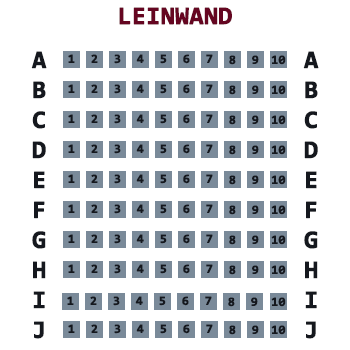
<style>
.page{position:relative;width:350px;height:350px;background:#ffffff}
.page>*{position:absolute;margin:0}
.t1{font:25px "Consolas-Bold";color:#650621;font-weight:bold}
.t2{font:25px "Consolas-Bold";color:#15181e;font-weight:bold}
.t3{font:12.5px "Consolas-Bold";color:#15181e;font-weight:bold}
</style>
<div class="page">
<p class="t1" style="left:119px;top:7px;width:113px;height:18px">LEINWAND</p>
<p class="t2" style="left:31px;top:51px;width:16px;height:288px">A<br>B<br>C<br>D<br>E<br>F<br>G<br>H<br>I<br>J</p>
<p class="t3" style="left:68px;top:54px;width:7px;height:9px">1</p>
<p class="t3" style="left:91px;top:54px;width:7px;height:9px">2</p>
<p class="t3" style="left:114px;top:54px;width:7px;height:10px">3</p>
<p class="t3" style="left:136px;top:54px;width:8px;height:9px">4</p>
<p class="t3" style="left:160px;top:54px;width:7px;height:10px">5</p>
<p class="t3" style="left:183px;top:54px;width:7px;height:10px">6</p>
<p class="t3" style="left:206px;top:54px;width:7px;height:9px">7</p>
<p class="t2" style="left:303px;top:51px;width:16px;height:288px">A<br>B<br>C<br>D<br>E<br>F<br>G<br>H<br>I<br>J</p>
<p class="t3" style="left:229px;top:55px;width:7px;height:10px">8</p>
<p class="t3" style="left:252px;top:55px;width:7px;height:9px">9</p>
<p class="t3" style="left:271px;top:55px;width:15px;height:10px">10</p>
<p class="t3" style="left:68px;top:84px;width:7px;height:9px">1</p>
<p class="t3" style="left:91px;top:84px;width:7px;height:9px">2</p>
<p class="t3" style="left:114px;top:84px;width:7px;height:10px">3</p>
<p class="t3" style="left:136px;top:84px;width:8px;height:9px">4</p>
<p class="t3" style="left:160px;top:84px;width:7px;height:10px">5</p>
<p class="t3" style="left:183px;top:84px;width:7px;height:10px">6</p>
<p class="t3" style="left:206px;top:84px;width:7px;height:9px">7</p>
<p class="t3" style="left:229px;top:85px;width:7px;height:10px">8</p>
<p class="t3" style="left:252px;top:85px;width:7px;height:9px">9</p>
<p class="t3" style="left:271px;top:85px;width:15px;height:10px">10</p>
<p class="t3" style="left:68px;top:114px;width:7px;height:9px">1</p>
<p class="t3" style="left:91px;top:114px;width:7px;height:9px">2</p>
<p class="t3" style="left:114px;top:114px;width:7px;height:10px">3</p>
<p class="t3" style="left:136px;top:114px;width:8px;height:9px">4</p>
<p class="t3" style="left:160px;top:114px;width:7px;height:10px">5</p>
<p class="t3" style="left:183px;top:114px;width:7px;height:10px">6</p>
<p class="t3" style="left:206px;top:114px;width:7px;height:9px">7</p>
<p class="t3" style="left:229px;top:115px;width:7px;height:10px">8</p>
<p class="t3" style="left:252px;top:115px;width:7px;height:9px">9</p>
<p class="t3" style="left:271px;top:115px;width:15px;height:10px">10</p>
<p class="t3" style="left:68px;top:144px;width:7px;height:9px">1</p>
<p class="t3" style="left:91px;top:144px;width:7px;height:9px">2</p>
<p class="t3" style="left:114px;top:144px;width:7px;height:10px">3</p>
<p class="t3" style="left:136px;top:144px;width:8px;height:9px">4</p>
<p class="t3" style="left:160px;top:144px;width:7px;height:10px">5</p>
<p class="t3" style="left:183px;top:144px;width:7px;height:10px">6</p>
<p class="t3" style="left:206px;top:144px;width:7px;height:9px">7</p>
<p class="t3" style="left:229px;top:145px;width:7px;height:10px">8</p>
<p class="t3" style="left:252px;top:145px;width:7px;height:9px">9</p>
<p class="t3" style="left:271px;top:145px;width:15px;height:10px">10</p>
<p class="t3" style="left:68px;top:174px;width:7px;height:9px">1</p>
<p class="t3" style="left:91px;top:174px;width:7px;height:9px">2</p>
<p class="t3" style="left:114px;top:174px;width:7px;height:10px">3</p>
<p class="t3" style="left:136px;top:174px;width:8px;height:9px">4</p>
<p class="t3" style="left:160px;top:174px;width:7px;height:10px">5</p>
<p class="t3" style="left:183px;top:174px;width:7px;height:10px">6</p>
<p class="t3" style="left:206px;top:174px;width:7px;height:9px">7</p>
<p class="t3" style="left:229px;top:175px;width:7px;height:10px">8</p>
<p class="t3" style="left:252px;top:175px;width:7px;height:9px">9</p>
<p class="t3" style="left:271px;top:175px;width:15px;height:10px">10</p>
<p class="t3" style="left:68px;top:204px;width:7px;height:9px">1</p>
<p class="t3" style="left:91px;top:204px;width:7px;height:9px">2</p>
<p class="t3" style="left:114px;top:204px;width:7px;height:10px">3</p>
<p class="t3" style="left:136px;top:204px;width:8px;height:9px">4</p>
<p class="t3" style="left:160px;top:204px;width:7px;height:10px">5</p>
<p class="t3" style="left:183px;top:204px;width:7px;height:10px">6</p>
<p class="t3" style="left:206px;top:204px;width:7px;height:9px">7</p>
<p class="t3" style="left:229px;top:205px;width:7px;height:10px">8</p>
<p class="t3" style="left:252px;top:205px;width:7px;height:9px">9</p>
<p class="t3" style="left:271px;top:205px;width:15px;height:10px">10</p>
<p class="t3" style="left:68px;top:234px;width:7px;height:9px">1</p>
<p class="t3" style="left:91px;top:234px;width:7px;height:9px">2</p>
<p class="t3" style="left:114px;top:234px;width:7px;height:10px">3</p>
<p class="t3" style="left:136px;top:234px;width:8px;height:9px">4</p>
<p class="t3" style="left:160px;top:234px;width:7px;height:10px">5</p>
<p class="t3" style="left:183px;top:234px;width:7px;height:10px">6</p>
<p class="t3" style="left:206px;top:234px;width:7px;height:9px">7</p>
<p class="t3" style="left:229px;top:235px;width:7px;height:10px">8</p>
<p class="t3" style="left:252px;top:235px;width:7px;height:9px">9</p>
<p class="t3" style="left:271px;top:235px;width:15px;height:10px">10</p>
<p class="t3" style="left:68px;top:264px;width:7px;height:9px">1</p>
<p class="t3" style="left:91px;top:264px;width:7px;height:9px">2</p>
<p class="t3" style="left:114px;top:264px;width:7px;height:10px">3</p>
<p class="t3" style="left:136px;top:264px;width:8px;height:9px">4</p>
<p class="t3" style="left:160px;top:264px;width:7px;height:10px">5</p>
<p class="t3" style="left:183px;top:264px;width:7px;height:10px">6</p>
<p class="t3" style="left:206px;top:264px;width:7px;height:9px">7</p>
<p class="t3" style="left:229px;top:265px;width:7px;height:10px">8</p>
<p class="t3" style="left:252px;top:265px;width:7px;height:9px">9</p>
<p class="t3" style="left:271px;top:265px;width:15px;height:10px">10</p>
<p class="t3" style="left:67px;top:296px;width:7px;height:9px">1</p>
<p class="t3" style="left:90px;top:296px;width:7px;height:9px">2</p>
<p class="t3" style="left:113px;top:296px;width:7px;height:10px">3</p>
<p class="t3" style="left:135px;top:296px;width:8px;height:9px">4</p>
<p class="t3" style="left:159px;top:296px;width:7px;height:10px">5</p>
<p class="t3" style="left:182px;top:296px;width:7px;height:10px">6</p>
<p class="t3" style="left:205px;top:296px;width:7px;height:9px">7</p>
<p class="t3" style="left:228px;top:297px;width:7px;height:10px">8</p>
<p class="t3" style="left:251px;top:297px;width:7px;height:9px">9</p>
<p class="t3" style="left:271px;top:297px;width:15px;height:10px">10</p>
<p class="t3" style="left:68px;top:324px;width:7px;height:9px">1</p>
<p class="t3" style="left:91px;top:324px;width:7px;height:9px">2</p>
<p class="t3" style="left:114px;top:324px;width:7px;height:10px">3</p>
<p class="t3" style="left:136px;top:324px;width:8px;height:9px">4</p>
<p class="t3" style="left:160px;top:324px;width:7px;height:10px">5</p>
<p class="t3" style="left:183px;top:324px;width:7px;height:10px">6</p>
<p class="t3" style="left:206px;top:324px;width:7px;height:9px">7</p>
<p class="t3" style="left:229px;top:325px;width:7px;height:10px">8</p>
<p class="t3" style="left:252px;top:325px;width:7px;height:9px">9</p>
<p class="t3" style="left:271px;top:325px;width:15px;height:10px">10</p>
</div>
